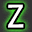
<style>
.page{position:relative;width:32px;height:32px}
.page>*{position:absolute;margin:0}
.t1{font:35px "Candara";letter-spacing:0.015em;color:#ffffff;font-weight:bold}
</style>
<div class="page">
<p class="t1" style="left:8px;top:4px;width:16px;height:24px">Z</p>
</div>
